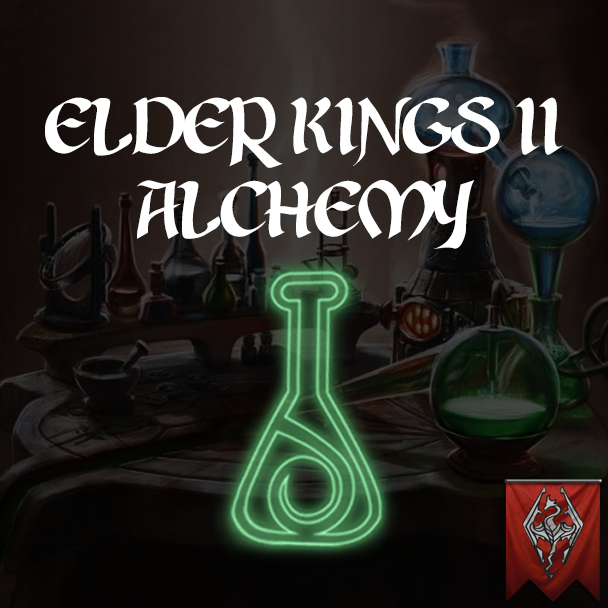
<style>
.page{position:relative;width:608px;height:608px}
.page>*{position:absolute;margin:0}
.t1{font:69.3px "Elixir-Medium";letter-spacing:-0.02em;color:#ffffff;text-transform:uppercase}
</style>
<div class="page">
<p class="t1" style="left:45px;top:96px;width:518px;height:153px;text-align:center">ELDER KINGS II<br>ALCHEMY</p>
</div>
